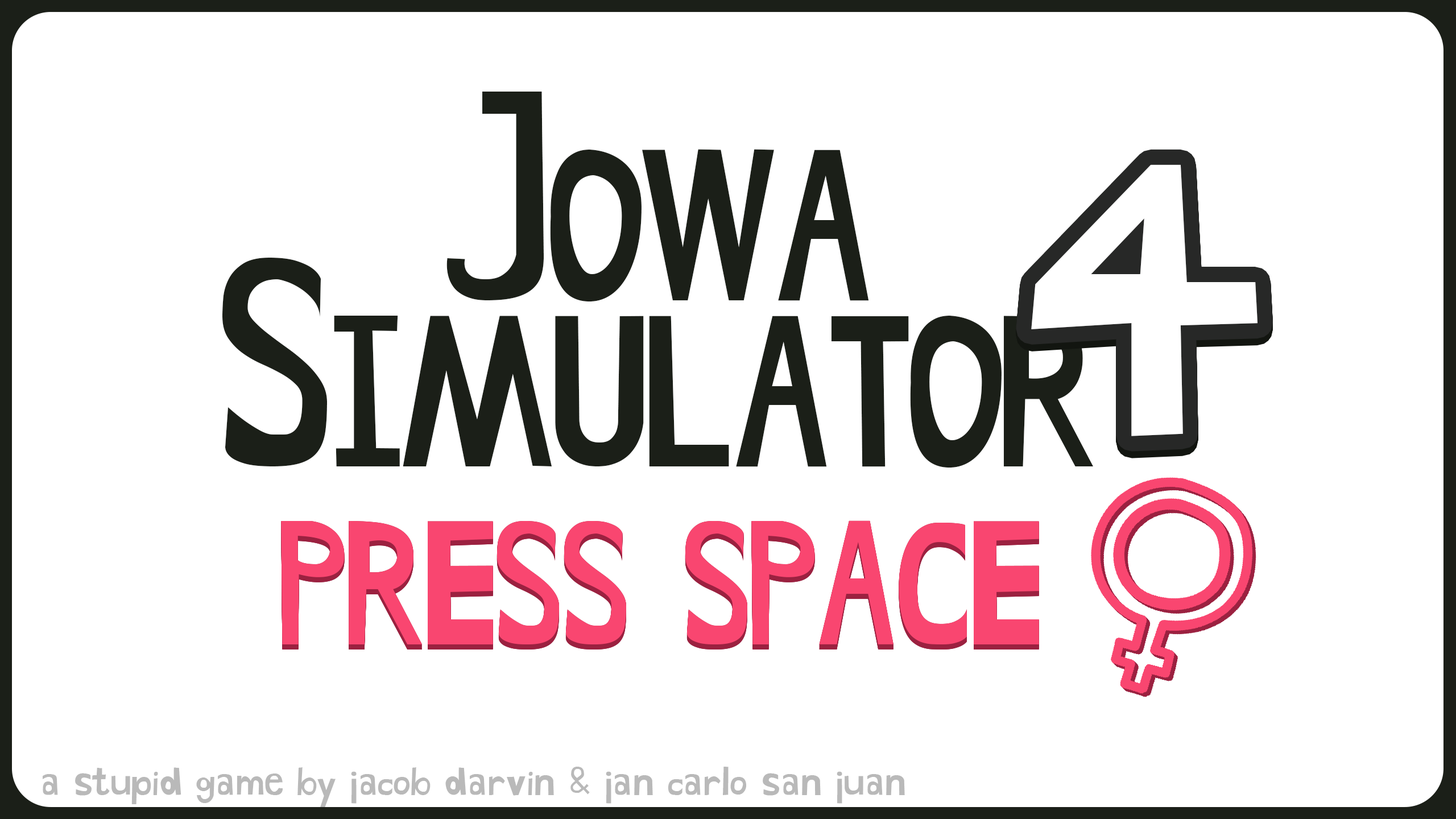
<style>
.page{position:relative;width:1456px;height:819px;background:#ffffff}
.page>*{position:absolute;margin:0}
.t1{font:205.3px/166.1px "HandDrawnShapes";color:#1b1f18}
.t2{font:284.4px/166.1px "HandDrawnShapes";color:#1b1f18}
.t3{font:439.1px "HandDrawnShapes";color:#ffffff}
.t4{font:168.3px "HandDrawnShapes";color:#f94670}
.t5{font:41.5px "HandDrawnShapes";color:#b9b9b9}
</style>
<div class="page">
<p class="t1" style="left:222px;top:92px;width:871px;height:376px;text-align:center"><span class="t2">J</span>OWA<br><span class="t2">S</span>IMULATOR</p>
<p class="t3" style="left:1031px;top:164px;width:226px;height:272px">4</p>
<p class="t4" style="left:281px;top:520px;width:758px;height:124px">PRESS SPACE</p>
<p class="t5" style="left:43px;top:766px;width:862px;height:42px">a stupid game by jacob darvin &amp; jan carlo san juan</p>
</div>
